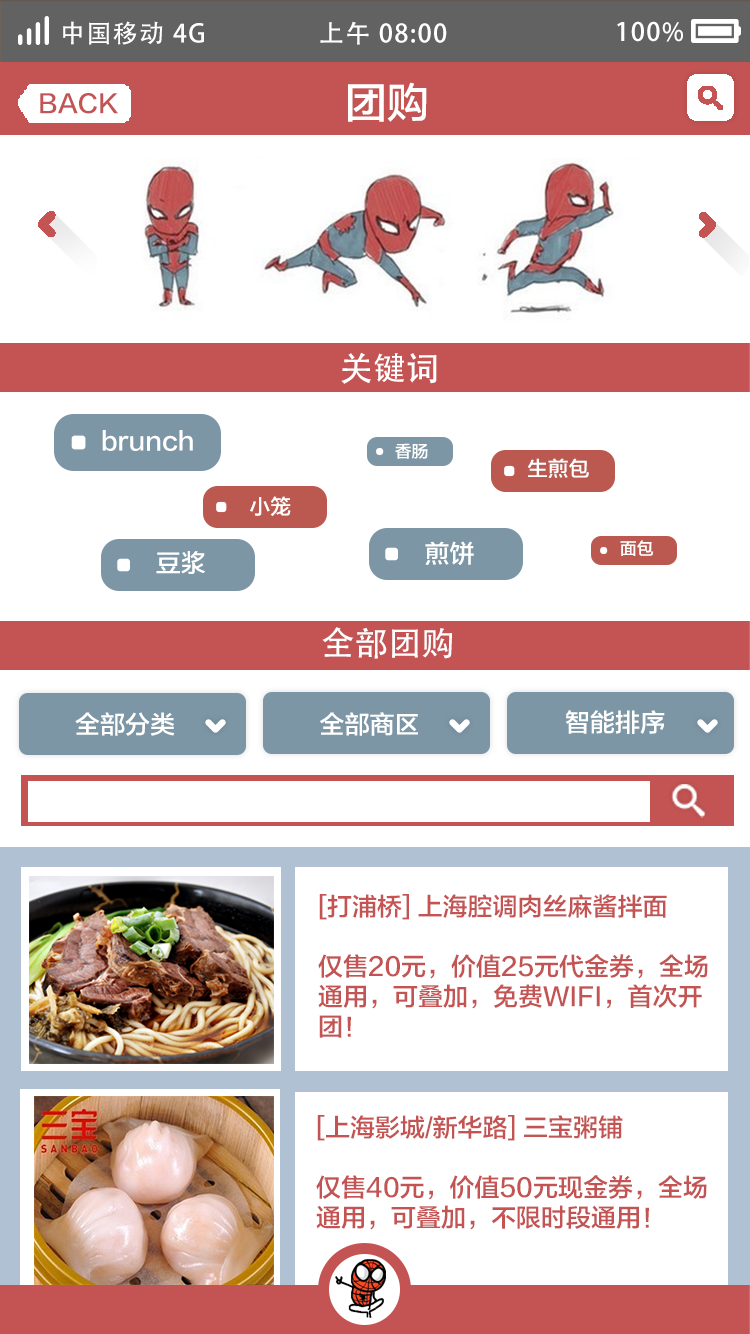
<style>
.page{position:relative;width:750px;height:1334px;background:#ffffff}
.page>*{position:absolute;margin:0}
.t1{font:25px "AdobeHeitiStd-Regular";letter-spacing:0.06em;color:#ffffff}
.t2{font:41.7px "FZLTZHK--GBK1-0";color:#ffffff;text-transform:uppercase}
.t3{font:25px "FZLTZHK--GBK1-0";color:#c35453;text-transform:uppercase}
.t4{font:33.3px "AdobeHeitiStd-Regular";color:#ffffff}
.t5{font:25px "FZLTZHK--GBK1-0";color:#ffffff}
.t6{font:16.7px "FZLTZHK--GBK1-0";color:#ffffff}
.t7{font:20.8px "FZLTZHK--GBK1-0";color:#ffffff}
.t8{font:25px "FZLTZHK--GBK1-0";color:#ffffff;text-transform:uppercase}
.t9{font:25px/16.8px "FZLTZHK--GBK1-0";color:#c35453;text-transform:uppercase}
</style>
<div class="page">
<p class="t1" style="left:63px;top:21px;width:141px;height:24px">中国移动 4G</p>
<p class="t1" style="left:320px;top:21px;width:127px;height:24px">上午 08:00</p>
<p class="t1" style="left:617px;top:21px;width:66px;height:21px">100%</p>
<p class="t2" style="left:348px;top:82px;width:79px;height:40px">团购</p>
<p class="t3" style="left:40px;top:92px;width:78px;height:22px">back</p>
<p class="t4" style="left:341px;top:352px;width:96px;height:32px">关键词</p>
<p class="t5" style="left:102px;top:430px;width:91px;height:21px">brunch</p>
<p class="t6" style="left:395px;top:443px;width:33px;height:16px">香肠</p>
<p class="t7" style="left:527px;top:458px;width:62px;height:20px">生煎包</p>
<p class="t7" style="left:250px;top:496px;width:41px;height:20px">小笼</p>
<p class="t5" style="left:425px;top:541px;width:49px;height:24px">煎饼</p>
<p class="t6" style="left:620px;top:540px;width:34px;height:16px">面包</p>
<p class="t5" style="left:156px;top:551px;width:49px;height:23px">豆浆</p>
<p class="t4" style="left:322px;top:627px;width:130px;height:32px">全部团购</p>
<p class="t8" style="left:75px;top:712px;width:100px;height:24px">全部分类</p>
<p class="t8" style="left:320px;top:712px;width:98px;height:24px">全部商区</p>
<p class="t8" style="left:565px;top:710px;width:100px;height:24px">智能排序</p>
<p class="t3" style="left:318px;top:894px;width:390px;height:144px"><span class="t9">[</span>打浦桥] 上海腔调肉丝麻酱拌面<br><br>仅售20元，价值25元代金券，全场通用，可叠加，免费WiFi，首次开团！</p>
<p class="t3" style="left:316px;top:1115px;width:391px;height:115px">[上海影城/新华路] 三宝粥铺<br><br>仅售40元，价值50元现金券，全场通用，可叠加，不限时段通用！</p>
</div>
